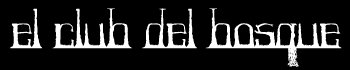
<style>
.page{position:relative;width:350px;height:70px;background:#000000}
.page>*{position:absolute;margin:0}
.t1{font:48px "Forestry";color:#ffffff}
</style>
<div class="page">
<p class="t1" style="left:10px;top:8px;width:332px;height:59px">El club del bosque</p>
</div>
